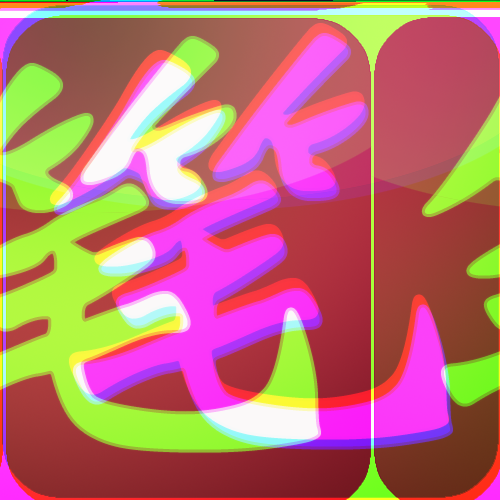
<style>
.page{position:relative;width:500px;height:500px}
.page>*{position:absolute;margin:0}
.t1{font:500px "STXinwei"}
</style>
<div class="page">
<p class="t1" style="left:52px;top:24px;width:394px;height:411px">笔</p>
</div>
